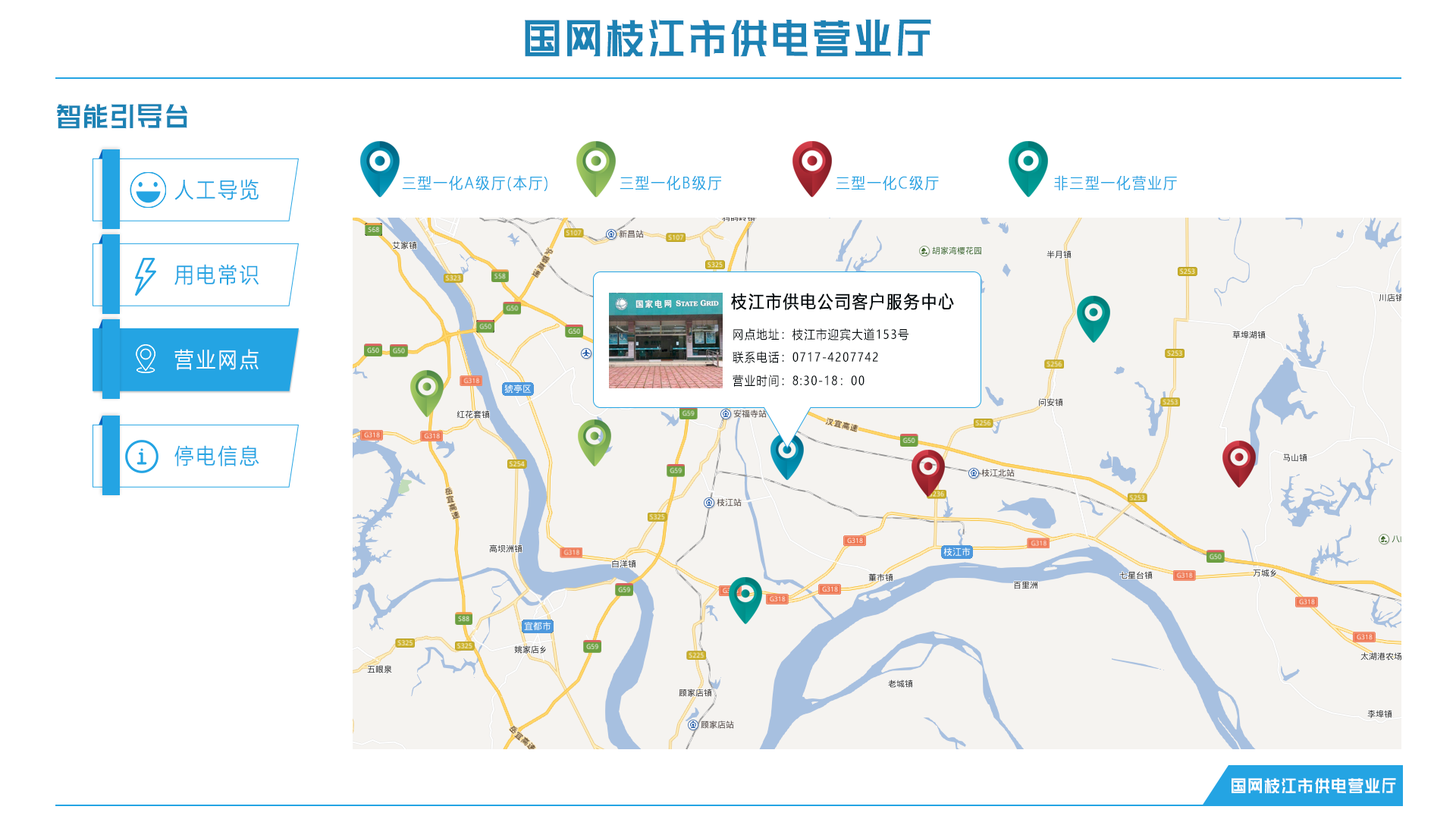
<style>
.page{position:relative;width:1456px;height:819px;background:#ffffff}
.page>*{position:absolute;margin:0}
.t1{font:61.3px "HuXiaoBoKuHei";letter-spacing:0.1em;color:#1d82b4;scale:0.61 1}
.t2{font:40.1px "HuXiaoBoKuHei";letter-spacing:0.1em;color:#1d82b4;scale:0.61 1}
.t3{font:21.4px "MicrosoftYaHeiLight";letter-spacing:0.1em;color:#24a4e3;font-weight:bold;scale:0.9 1}
.t4{font:15.4px "MicrosoftYaHeiLight";letter-spacing:0.1em;color:#24a4e3;font-weight:bold;scale:0.9 1}
.t5{font:17.3px "MicrosoftYaHei";letter-spacing:0.1em;color:#02090d;font-weight:bold;scale:0.89 1}
.t6{font:12.4px "MicrosoftYaHei";letter-spacing:0.1em;color:#02090d;scale:0.88 1}
.t7{font:21.4px "MicrosoftYaHeiLight";letter-spacing:0.1em;color:#ffffff;font-weight:bold;scale:0.9 1}
.t8{font:24.8px "HuXiaoBoKuHei";letter-spacing:0.1em;color:#ffffff;scale:0.61 1}
</style>
<div class="page">
<p class="t1" style="left:525px;top:19px;width:406px;height:38px">国网枝江市供电营业厅</p>
<p class="t2" style="left:57px;top:104px;width:131px;height:25px">智能引导台</p>
<p class="t3" style="left:174px;top:179px;width:85px;height:21px">人工导览</p>
<p class="t4" style="left:402px;top:175px;width:146px;height:16px">三型一化A级厅(本厅)</p>
<p class="t4" style="left:620px;top:176px;width:101px;height:14px">三型一化B级厅</p>
<p class="t4" style="left:836px;top:176px;width:103px;height:14px">三型一化C级厅</p>
<p class="t4" style="left:1054px;top:175px;width:123px;height:15px">非三型一化营业厅</p>
<p class="t3" style="left:174px;top:264px;width:85px;height:21px">用电常识</p>
<p class="t5" style="left:731px;top:293px;width:223px;height:17px">枝江市供电公司客户服务中心</p>
<p class="t6" style="left:733px;top:328px;width:175px;height:12px">网点地址：枝江市迎宾大道153号</p>
<p class="t7" style="left:174px;top:349px;width:85px;height:21px">营业网点</p>
<p class="t6" style="left:733px;top:351px;width:145px;height:12px">联系电话：0717-4207742</p>
<p class="t6" style="left:733px;top:375px;width:131px;height:12px">营业时间：8:30-18：00</p>
<p class="t3" style="left:174px;top:445px;width:85px;height:21px">停电信息</p>
<p class="t8" style="left:1231px;top:778px;width:165px;height:16px">国网枝江市供电营业厅</p>
</div>
